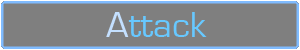
<style>
.page{position:relative;width:300px;height:50px;background:#7f7f7f}
.page>*{position:absolute;margin:0}
.t1{font:37.4px "EurostileRegular";color:#67c8ff}
.t2{font:37.4px "EurostileRegular";color:#c4e0ff}
</style>
<div class="page">
<p class="t1" style="left:106px;top:12px;width:101px;height:25px"><span class="t2">A</span>ttack</p>
</div>
